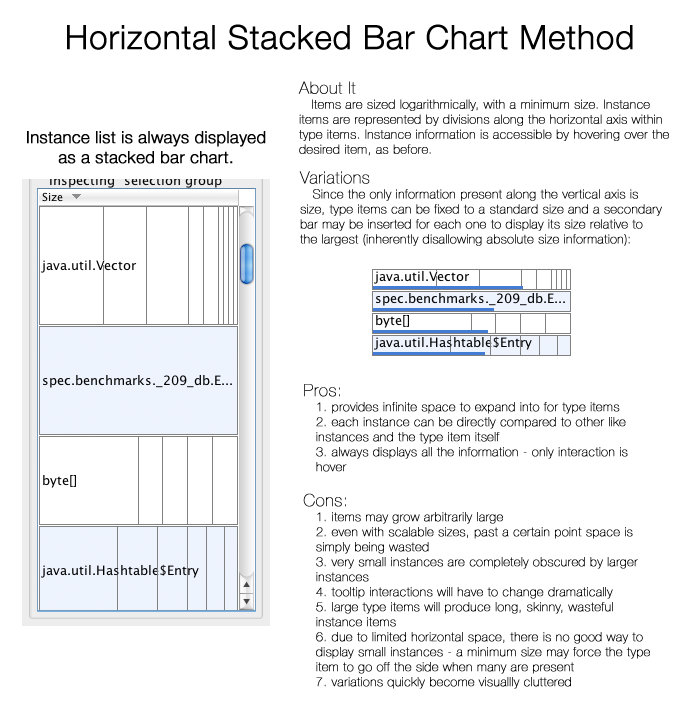
<style>
.page{position:relative;width:696px;height:726px;background:#ffffff}
.page>*{position:absolute;margin:0}
.t1{font:33.3px "HelveticaNeue-Light";color:#000000;font-weight:bold}
.t2{font:12.5px "HelveticaNeue-UltraLight";letter-spacing:0.025em;color:#000000;font-weight:bold}
.t3{font:16.7px "HelveticaNeue-UltraLight";letter-spacing:0.025em;color:#000000;font-weight:bold}
.t4{font:16.7px "HelveticaNeue-Light";color:#000000;font-weight:bold}
</style>
<div class="page">
<p class="t1" style="left:67px;top:24px;width:566px;height:26px">Horizontal Stacked Bar Chart Method</p>
<p class="t2" style="left:298px;top:81px;width:371px;height:75px"><span class="t3">About It<br></span>Items are sized logarithmically, with a minimum size. Instance items are represented by divisions along the horizontal axis within type items. Instance information is accessible by hovering over the desired item, as before.</p>
<p class="t4" style="left:27px;top:131px;width:239px;height:33px;text-align:center">Instance list is always displayed<br>as a stacked bar chart.</p>
<p class="t2" style="left:299px;top:171px;width:363px;height:75px"><span class="t3">Variations<br></span>Since the only information present along the vertical axis is size, type items can be fixed to a standard size and a secondary bar may be inserted for each one to display its size relative to the largest (inherently disallowing absolute size information):</p>
<p class="t2" style="left:303px;top:384px;width:347px;height:305px"><span class="t3">Pros:<br></span>1. provides infinite space to expand into for type items<br>2. each instance can be directly compared to other like instances and the type item itself<br>3. always displays all the information - only interaction is hover<br><br><span class="t3">Cons:<br></span>1. items may grow arbitrarily large<br>2. even with scalable sizes, past a certain point space is simply being wasted<br>3. very small instances are completely obscured by larger instances<br>4. tooltip interactions will have to change dramatically<br>5. large type items will produce long, skinny, wasteful instance items<br>6. due to limited horizontal space, there is no good way to display small instances - a minimum size may force the type item to go off the side when many are present<br>7. variations quickly become visuallly cluttered</p>
</div>
